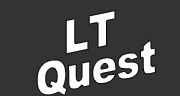
<style>
.page{position:relative;width:180px;height:96px;background:#333333}
.page>*{position:absolute;margin:0}
.t1{font:45.6px/35.9px "Arial-Black";letter-spacing:-0.05em;color:#ffffff;font-weight:bold;font-style:italic;scale:0.86 1}
</style>
<div class="page">
<p class="t1" style="left:36px;top:10px;width:120px;height:86px;text-align:center;rotate:-12deg">LT<br>Quest</p>
</div>
